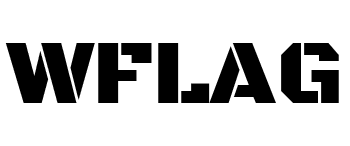
<style>
.page{position:relative;width:350px;height:146px;background:#ffffff}
.page>*{position:absolute;margin:0}
.t1{font:91.7px "BlackOpsOne-Regular";color:#000000}
</style>
<div class="page">
<p class="t1" style="left:5px;top:43px;width:334px;height:60px">WFLAG</p>
</div>
